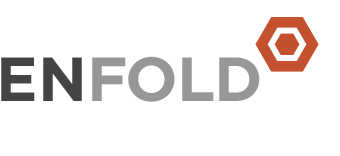
<style>
.page{position:relative;width:340px;height:156px;background:#ffffff}
.page>*{position:absolute;margin:0}
.t1{font:62px "Gotham-Bold";color:#444444;text-transform:uppercase}
.t2{font:62px "Gotham-Bold";color:#979797;text-transform:uppercase}
</style>
<div class="page">
<p class="t1" style="left:1px;top:57px;width:81px;height:44px">En</p>
<p class="t2" style="left:92px;top:56px;width:168px;height:46px">fold</p>
</div>
